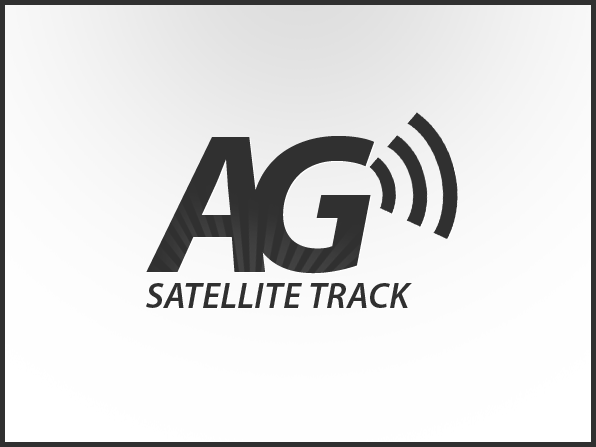
<style>
.page{position:relative;width:596px;height:447px}
.page>*{position:absolute;margin:0}
.t1{font:200px "MyriadPro-BoldIt";letter-spacing:-0.14em;color:#303030}
.t2{font:36px "MyriadPro-SemiboldIt";letter-spacing:0.01em;color:#303030;text-transform:uppercase}
</style>
<div class="page">
<p class="t1" style="left:146px;top:136px;width:228px;height:138px">AG</p>
<p class="t2" style="left:146px;top:283px;width:266px;height:25px">satellite TRACK</p>
</div>
